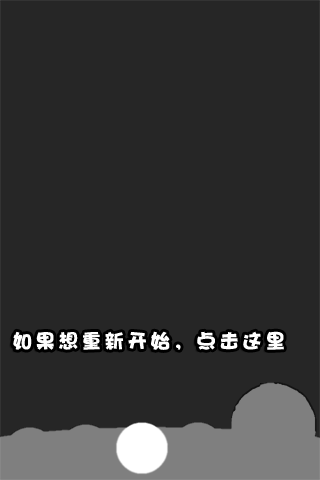
<style>
.page{position:relative;width:320px;height:480px;background:#262626}
.page>*{position:absolute;margin:0}
.t1{font:20px "DFPHaiBaoW12";letter-spacing:0.15em;color:#ffffff}
</style>
<div class="page">
<p class="t1" style="left:13px;top:331px;width:271px;height:19px">如果想重新开始，点击这里</p>
</div>
